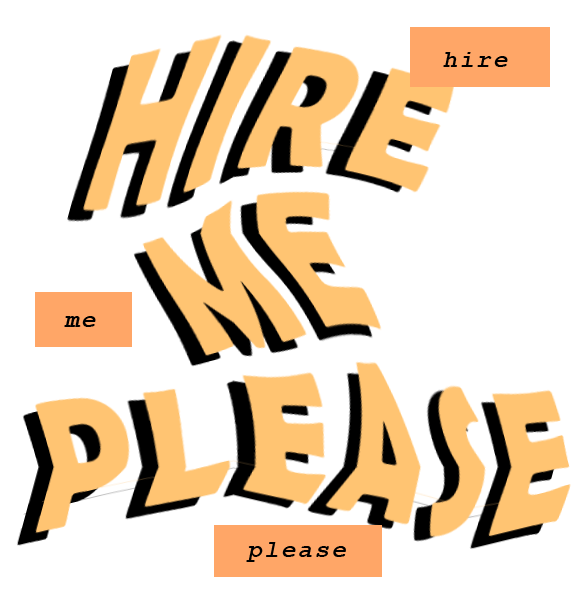
<style>
.page{position:relative;width:572px;height:591px;background:#ffffff}
.page>*{position:absolute;margin:0}
.t1{font:24px "CourierNewPS-BoldItalicMT";letter-spacing:0.1em;color:#000000}
</style>
<div class="page">
<p class="t1" style="left:443px;top:52px;width:65px;height:15px">hire</p>
<p class="t1" style="left:64px;top:316px;width:32px;height:11px">me</p>
<p class="t1" style="left:246px;top:542px;width:100px;height:20px">please</p>
</div>
